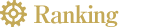
<style>
.page{position:relative;width:148px;height:27px;background:#ffffff}
.page>*{position:absolute;margin:0}
.t1{font:24px "RyuminPro-ExBold";letter-spacing:-0.08em;color:#c4a956}
</style>
<div class="page">
<p class="t1" style="left:34px;top:5px;width:85px;height:22px">Ranking</p>
</div>
